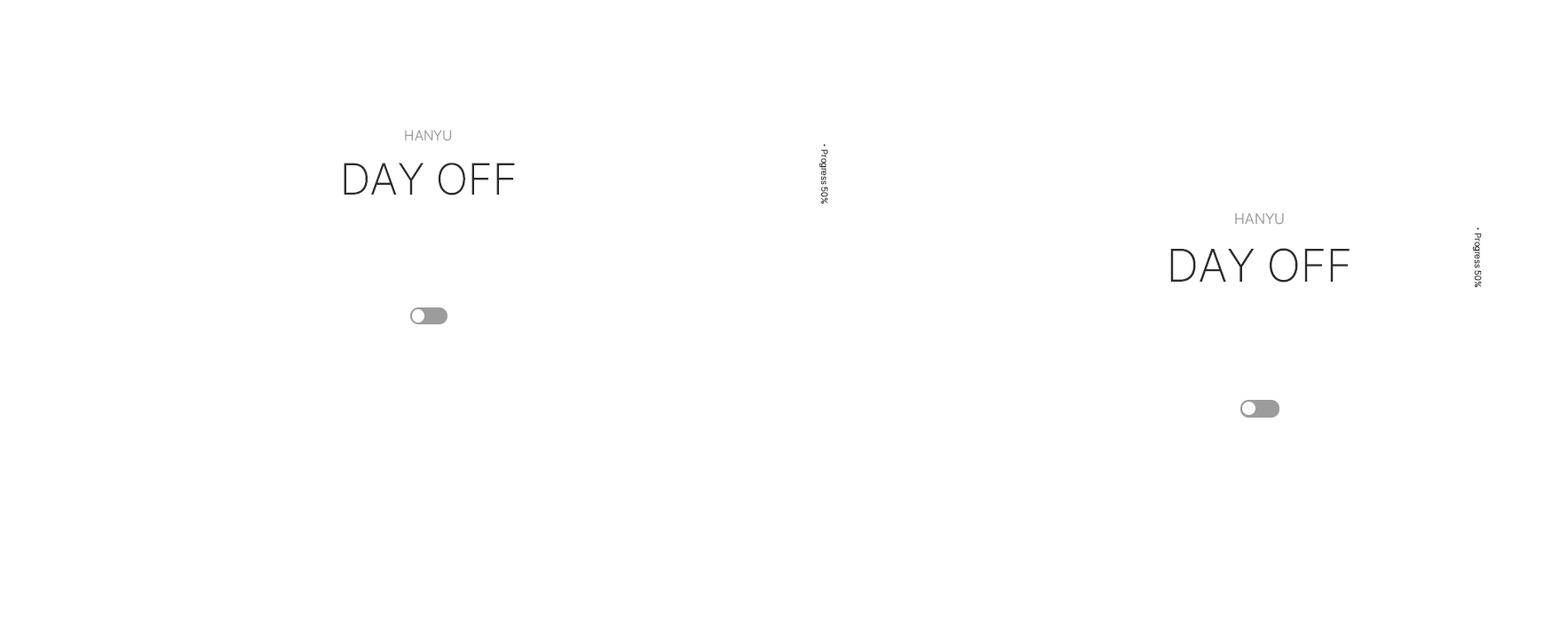
<style>
.page{position:relative;width:1568px;height:622px;background:#ffffff}
.page>*{position:absolute;margin:0}
.t1{font:14.2px "Pretendard-Light";letter-spacing:0.01em;color:#9c9c9c}
.t2{font:8.9px "Pretendard-Light";letter-spacing:0.01em;color:#2c2c2c}
.t3{font:44.4px "Pretendard-ExtraLight";letter-spacing:0.01em;color:#2c2c2c}
.t4{font:14.9px "Pretendard-Light";letter-spacing:0.01em;color:#9c9c9c}
.t5{font:46.6px "Pretendard-ExtraLight";letter-spacing:0.01em;color:#2c2c2c}
</style>
<div class="page">
<p class="t1" style="left:405px;top:130px;width:47px;height:11px">HANYU</p>
<p class="t2" style="left:819px;top:144px;width:9px;height:60px;rotate:90deg">• Progress 50%</p>
<p class="t3" style="left:344px;top:162px;width:171px;height:33px">DAY OFF</p>
<p class="t4" style="left:1235px;top:213px;width:49px;height:12px">HANYU</p>
<p class="t2" style="left:1472px;top:227px;width:10px;height:61px;rotate:90deg">• Progress 50%</p>
<p class="t5" style="left:1170px;top:248px;width:180px;height:34px">DAY OFF</p>
</div>
